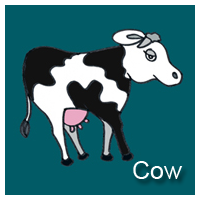
<style>
.page{position:relative;width:200px;height:200px;background:#015b66}
.page>*{position:absolute;margin:0}
.t1{font:25px "ArialMT";color:#ffffff}
</style>
<div class="page">
<p class="t1" style="left:133px;top:161px;width:50px;height:18px">Cow</p>
</div>
